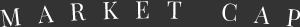
<style>
.page{position:relative;width:300px;height:27px;background:#333333}
.page>*{position:absolute;margin:0}
.t1{font:24px "PlayfairDisplay-Regular";letter-spacing:0.7em;color:#ffffff;text-transform:uppercase}
</style>
<div class="page">
<p class="t1" style="left:0px;top:1px;width:301px;height:27px">market cap</p>
</div>
